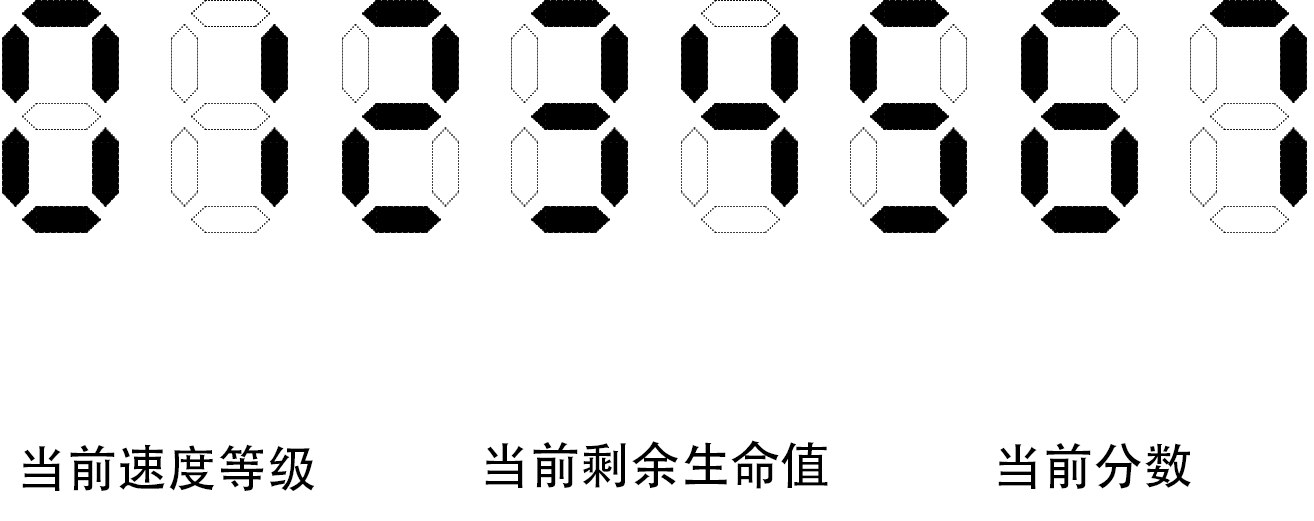
<style>
.page{position:relative;width:1314px;height:521px;background:#ffffff}
.page>*{position:absolute;margin:0}
.t1{font:50px "AdobeHeitiStd-Regular";color:#000000}
</style>
<div class="page">
<p class="t1" style="left:22px;top:444px;width:293px;height:47px">当前速度等级</p>
<p class="t1" style="left:485px;top:440px;width:343px;height:49px">当前剩余生命值</p>
<p class="t1" style="left:998px;top:443px;width:193px;height:46px">当前分数</p>
</div>
